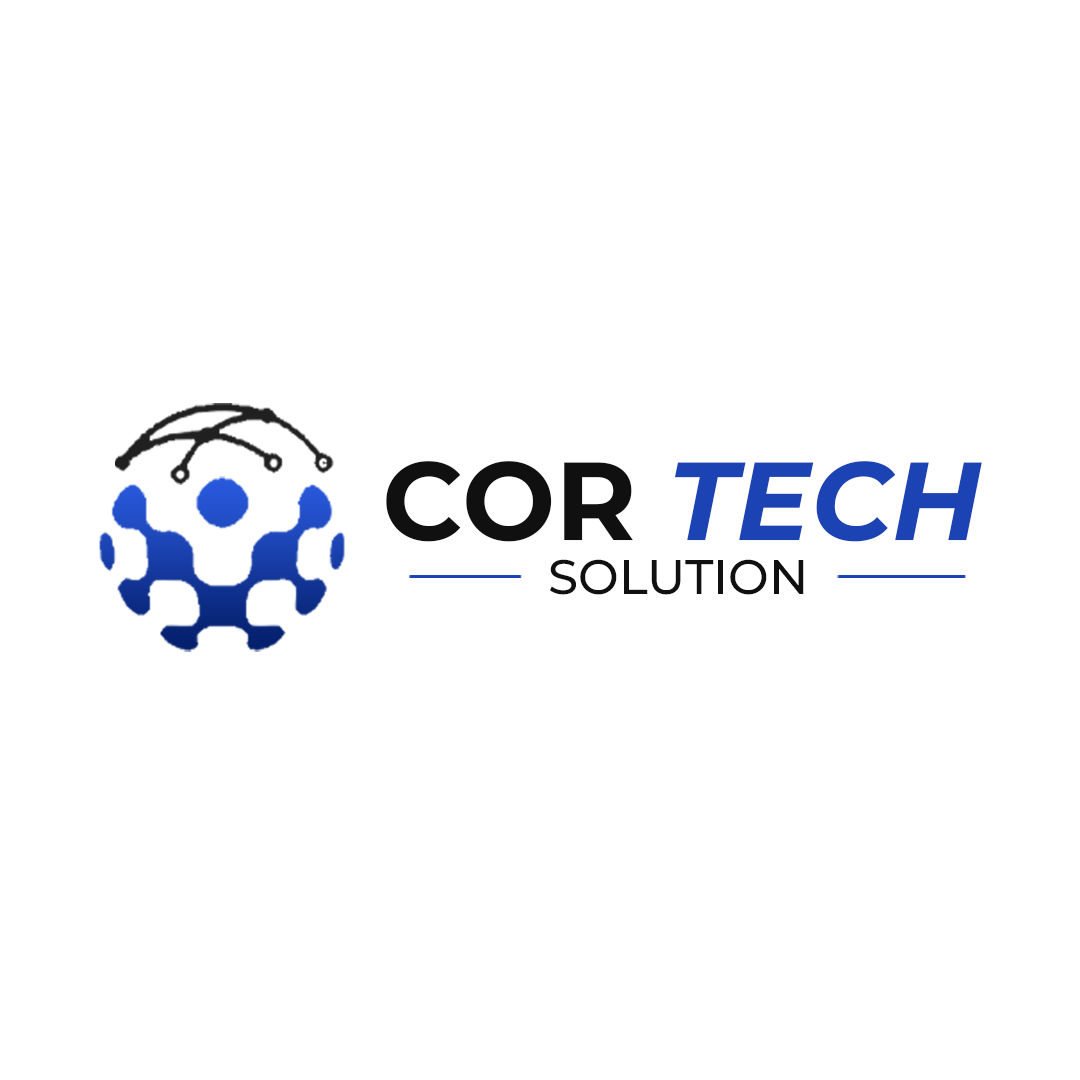
<style>
.page{position:relative;width:1080px;height:1080px;background:#ffffff}
.page>*{position:absolute;margin:0}
.t1{font:110.7px "Montserrat-BoldItalic";color:#1b43b3}
.t2{font:110.7px "Montserrat-Bold";color:#101010}
.t3{font:48.4px "Montserrat-Medium";color:#101010;text-transform:uppercase}
</style>
<div class="page">
<p class="t1" style="left:386px;top:461px;width:596px;height:81px"><span class="t2">COR </span>TECH</p>
<p class="t3" style="left:550px;top:559px;width:254px;height:36px">Solution</p>
</div>
